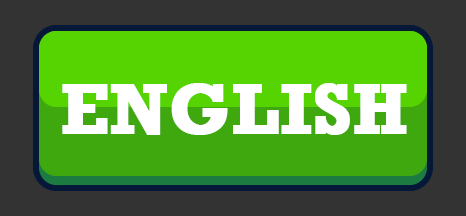
<style>
.page{position:relative;width:466px;height:216px;background:#333333}
.page>*{position:absolute;margin:0}
.t1{font:72px "Rockwell-Bold";color:#ffffff;text-transform:uppercase;font-weight:bold}
</style>
<div class="page">
<p class="t1" style="left:62px;top:83px;width:345px;height:52px">English</p>
</div>
